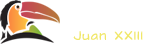
<style>
.page{position:relative;width:156px;height:44px;background:#ffffff}
.page>*{position:absolute;margin:0}
.t1{font:11.1px "ArchitectsDaughter";letter-spacing:0.12em;color:#f0e769}
</style>
<div class="page">
<p class="t1" style="left:73px;top:31px;width:70px;height:9px">Juan XXIII</p>
</div>
